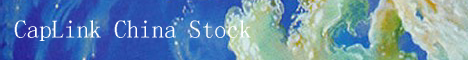
<style>
.page{position:relative;width:468px;height:60px}
.page>*{position:absolute;margin:0}
.t1{font:25px "Á¥Êé-Regular";color:#ffffff}
</style>
<div class="page">
<p class="t1" style="left:14px;top:20px;width:237px;height:21px">CapLink China Stock</p>
</div>
